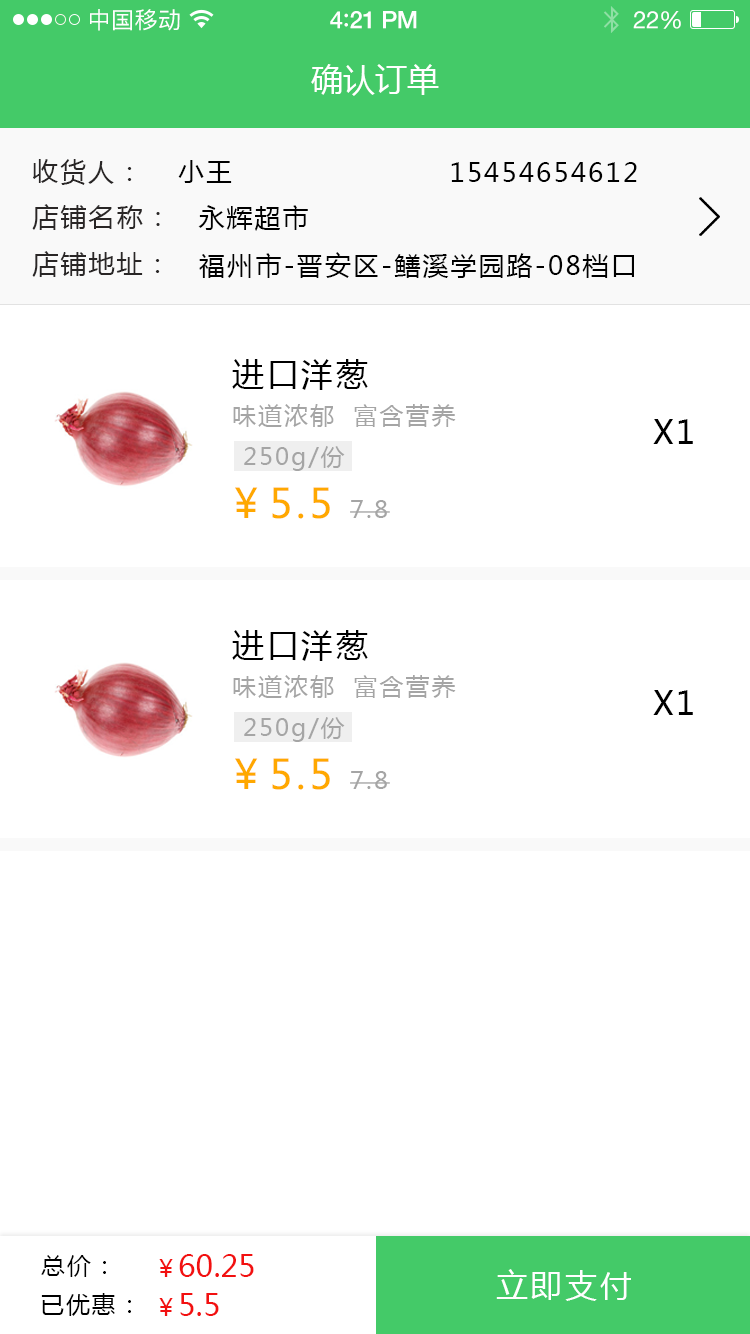
<style>
.page{position:relative;width:750px;height:1334px;background:#ffffff}
.page>*{position:absolute;margin:0}
.t1{font:23px "PingFangSC-Regular";letter-spacing:0.02em;color:#ffffff}
.t2{font:24px "HelveticaNeue-Medium";letter-spacing:-0.02em;color:#ffffff}
.t3{font:26px "Avenir-Medium";letter-spacing:-0.02em;color:#ffffff}
.t4{font:24px "HelveticaNeue";letter-spacing:-0.02em;color:#ffffff}
.t5{font:32px "MicrosoftYaHei";color:#ffffff;text-transform:uppercase}
.t6{font:26px "MicrosoftYaHei";letter-spacing:0.08em;color:#292626;text-transform:uppercase}
.t7{font:26px "MicrosoftYaHei";letter-spacing:0.08em;color:#000000;text-transform:uppercase}
.t8{font:32px "MicrosoftYaHei";letter-spacing:0.08em;color:#000000;text-transform:uppercase}
.t9{font:24px "MicrosoftYaHei";letter-spacing:0.08em;color:#a5a5a5;text-transform:uppercase}
.t10{font:24px "MicrosoftYaHei";letter-spacing:0.08em;color:#a5a5a5}
.t11{font:40.4px "MicrosoftYaHei";letter-spacing:0.08em;color:#ffa800;text-transform:uppercase}
.t12{font:30px "MicrosoftYaHei";color:#f21010;text-transform:uppercase}
.t13{font:24px "MicrosoftYaHei";color:#f21010;text-transform:uppercase}
.t14{font:24px "MicrosoftYaHei";letter-spacing:0.08em;color:#000000;text-transform:uppercase}
.t15{font:32px "MicrosoftYaHei";letter-spacing:0.08em;color:#ffffff;text-transform:uppercase}
</style>
<div class="page">
<p class="t1" style="left:90px;top:9px;width:90px;height:22px">中国移动</p>
<p class="t2" style="left:330px;top:11px;width:87px;height:18px">4<span class="t3">:</span>21 PM</p>
<p class="t4" style="left:633px;top:11px;width:48px;height:18px">22%</p>
<p class="t5" style="left:311px;top:64px;width:128px;height:32px">确认订单</p>
<p class="t6" style="left:33px;top:159px;width:99px;height:26px">收货人：</p>
<p class="t7" style="left:178px;top:160px;width:54px;height:23px">小王</p>
<p class="t7" style="left:451px;top:162px;width:186px;height:20px">15454654612</p>
<p class="t6" style="left:32px;top:204px;width:128px;height:26px">店铺名称：</p>
<p class="t7" style="left:198px;top:205px;width:110px;height:26px">永辉超市</p>
<p class="t6" style="left:32px;top:251px;width:128px;height:26px">店铺地址：</p>
<p class="t7" style="left:199px;top:252px;width:435px;height:26px">福州市-晋安区-鳝溪学园路-08档口</p>
<p class="t8" style="left:232px;top:359px;width:136px;height:31px">进口洋葱</p>
<p class="t9" style="left:233px;top:404px;width:223px;height:23px">味道浓郁  富含营养</p>
<p class="t8" style="left:653px;top:419px;width:40px;height:25px">x1</p>
<p class="t10" style="left:244px;top:446px;width:101px;height:25px">250g/份</p>
<p class="t11" style="left:235px;top:487px;width:95px;height:32px">￥5.5</p>
<p class="t10" style="left:350px;top:500px;width:40px;height:18px">7.8</p>
<p class="t8" style="left:232px;top:630px;width:136px;height:31px">进口洋葱</p>
<p class="t9" style="left:233px;top:675px;width:223px;height:23px">味道浓郁  富含营养</p>
<p class="t8" style="left:653px;top:690px;width:40px;height:25px">x1</p>
<p class="t10" style="left:244px;top:717px;width:101px;height:25px">250g/份</p>
<p class="t11" style="left:235px;top:758px;width:95px;height:32px">￥5.5</p>
<p class="t10" style="left:350px;top:771px;width:40px;height:18px">7.8</p>
<p class="t12" style="left:159px;top:1254px;width:95px;height:23px"><span class="t13">￥</span>60.25</p>
<p class="t14" style="left:41px;top:1255px;width:65px;height:22px">总价：</p>
<p class="t15" style="left:496px;top:1269px;width:135px;height:32px">立即支付</p>
<p class="t14" style="left:41px;top:1293px;width:90px;height:23px">已优惠：</p>
<p class="t12" style="left:159px;top:1293px;width:60px;height:23px"><span class="t13">￥</span>5.5</p>
</div>
